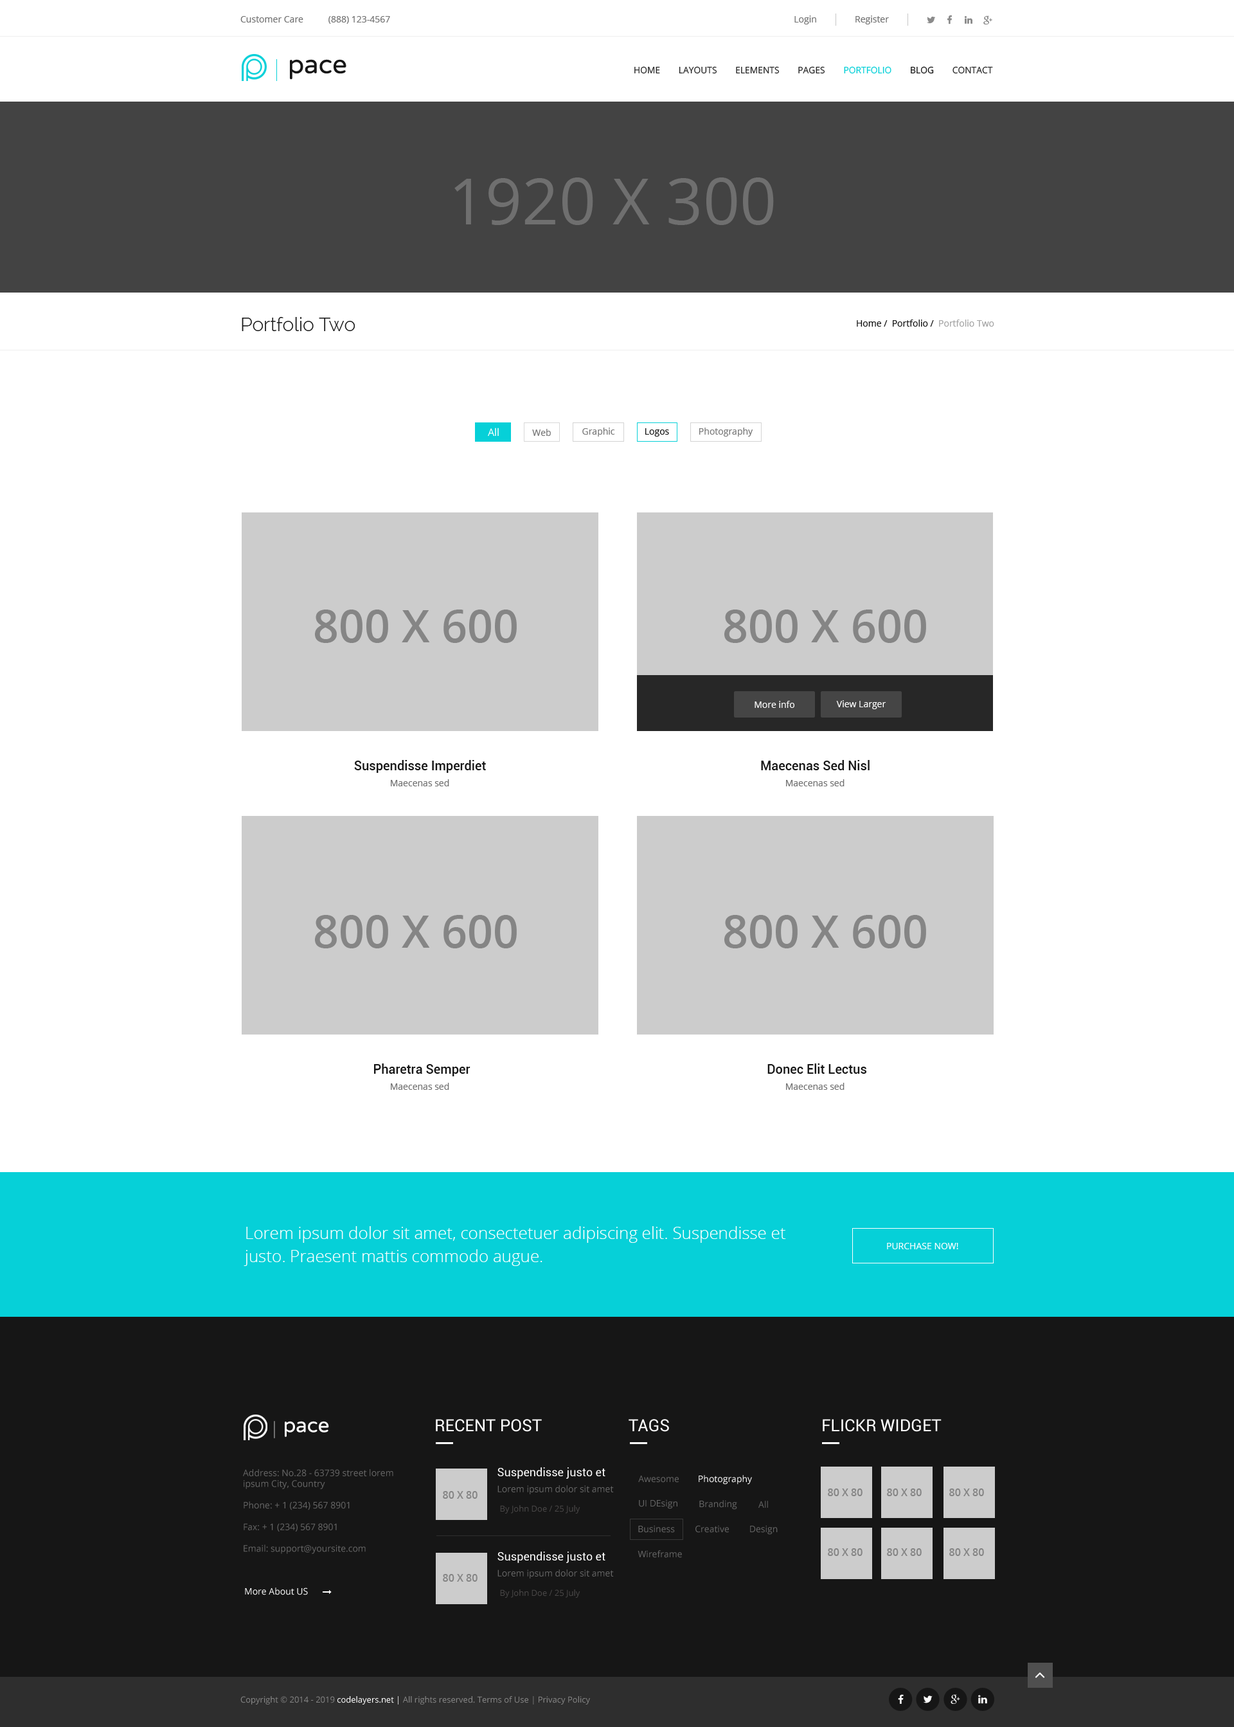
<style>
.page{position:relative;width:1234px;height:1727px;background:#ffffff}
.page>*{position:absolute;margin:0}
.t1{font:9px "OpenSans";color:#727272}
.t2{font:25.7px "VarelaRound-Regular";color:#161616}
.t3{font:9px "OpenSans";color:#272727;text-transform:uppercase}
.t4{font:9px "OpenSans";color:#06d0d8;text-transform:uppercase}
.t5{font:9px "OpenSans";color:#161616;text-transform:uppercase}
.t6{font:64.3px "OpenSans";color:#6f6f6f;text-transform:uppercase}
.t7{font:19.3px "Raleway-Light";color:#161616}
.t8{font:9px "OpenSans";color:#161616}
.t9{font:9px "OpenSans";color:#a4a4a4}
.t10{font:10.3px "OpenSans";color:#ffffff}
.t11{font:9px "OpenSans";color:#787878}
.t12{font:45px "OpenSans-Semibold";color:#858585;text-transform:uppercase}
.t13{font:9px "OpenSans";color:#ffffff}
.t14{font:12.9px "Roboto-Medium";color:#161616}
.t15{font:16.7px/23.1px "OpenSans-Light";color:#ffffff}
.t16{font:9px "OpenSans";color:#ffffff;text-transform:uppercase}
.t17{font:20.2px "VarelaRound-Regular";color:#ffffff}
.t18{font:16.7px "Roboto-Regular";color:#ffffff;text-transform:uppercase}
.t19{font:9px "OpenSans";color:#666666}
.t20{font:11.6px "Roboto-Regular";color:#ffffff}
.t21{font:10.3px "OpenSans-Semibold";color:#858585;text-transform:uppercase}
.t22{font:8.4px "OpenSans";color:#494747}
.t23{font:8.4px "OpenSans-Regular";color:#858585}
.t24{font:8.4px "OpenSans-Regular";color:#ffffff}
</style>
<div class="page">
<p class="t1" style="left:240px;top:16px;width:63px;height:6px">Customer Care</p>
<p class="t1" style="left:328px;top:16px;width:62px;height:8px">(888) 123-4567</p>
<p class="t1" style="left:795px;top:15px;width:21px;height:9px">Login</p>
<p class="t1" style="left:856px;top:15px;width:33px;height:9px">Register</p>
<p class="t2" style="left:290px;top:59px;width:56px;height:21px">pace</p>
<p class="t3" style="left:634px;top:66px;width:359px;height:8px">Home        layouts        elements        pages        <span class="t4">portfolio        </span><span class="t5">blog</span>        contact</p>
<p class="t6" style="left:455px;top:177px;width:319px;height:48px">1920 x 300</p>
<p class="t7" style="left:242px;top:317px;width:114px;height:14px">Portfolio Two</p>
<p class="t8" style="left:857px;top:320px;width:138px;height:7px">Home /  Portfolio /  <span class="t9">Portfolio Two</span></p>
<p class="t10" style="left:488px;top:428px;width:11px;height:8px">All</p>
<p class="t11" style="left:532px;top:429px;width:19px;height:7px">Web</p>
<p class="t11" style="left:582px;top:428px;width:33px;height:9px">Graphic</p>
<p class="t8" style="left:645px;top:428px;width:24px;height:9px">Logos</p>
<p class="t11" style="left:699px;top:428px;width:54px;height:9px">Photography</p>
<p class="t12" style="left:315px;top:609px;width:202px;height:34px">800 x 600</p>
<p class="t12" style="left:724px;top:609px;width:202px;height:34px">800 x 600</p>
<p class="t13" style="left:755px;top:701px;width:40px;height:7px">More info</p>
<p class="t13" style="left:836px;top:700px;width:51px;height:9px">View Larger</p>
<p class="t14" style="left:354px;top:760px;width:132px;height:13px">Suspendisse Imperdiet</p>
<p class="t14" style="left:761px;top:760px;width:109px;height:10px">Maecenas Sed Nisl</p>
<p class="t1" style="left:391px;top:779px;width:58px;height:7px">Maecenas sed</p>
<p class="t1" style="left:786px;top:779px;width:59px;height:7px">Maecenas sed</p>
<p class="t12" style="left:315px;top:915px;width:202px;height:33px">800 x 600</p>
<p class="t12" style="left:724px;top:915px;width:202px;height:33px">800 x 600</p>
<p class="t14" style="left:374px;top:1063px;width:97px;height:13px">Pharetra Semper</p>
<p class="t14" style="left:768px;top:1063px;width:99px;height:11px">Donec Elit Lectus</p>
<p class="t1" style="left:391px;top:1083px;width:58px;height:7px">Maecenas sed</p>
<p class="t1" style="left:786px;top:1083px;width:59px;height:7px">Maecenas sed</p>
<p class="t15" style="left:244px;top:1226px;width:542px;height:40px">Lorem ipsum dolor sit amet, consectetuer adipiscing elit. Suspendisse et justo. Praesent mattis commodo augue.</p>
<p class="t16" style="left:887px;top:1243px;width:72px;height:6px">Purchase now!</p>
<p class="t17" style="left:285px;top:1421px;width:44px;height:16px">pace</p>
<p class="t18" style="left:436px;top:1419px;width:106px;height:13px">Recent Post</p>
<p class="t18" style="left:629px;top:1419px;width:40px;height:13px">Tags</p>
<p class="t18" style="left:823px;top:1419px;width:119px;height:13px">Flickr Widget</p>
<p class="t19" style="left:243px;top:1469px;width:150px;height:85px">Address: No.28 - 63739 street lorem ipsum City, Country<br><br>Phone: + 1 (234) 567 8901<br><br>Fax: + 1 (234) 567 8901<br><br>Email: support@yoursite.com</p>
<p class="t20" style="left:498px;top:1467px;width:108px;height:12px">Suspendisse justo et</p>
<p class="t19" style="left:638px;top:1475px;width:41px;height:7px">Awesome</p>
<p class="t13" style="left:699px;top:1475px;width:53px;height:9px">Photography</p>
<p class="t21" style="left:443px;top:1491px;width:35px;height:7px">80 x 80</p>
<p class="t19" style="left:498px;top:1485px;width:116px;height:9px">Lorem ipsum dolor sit amet</p>
<p class="t21" style="left:828px;top:1488px;width:35px;height:8px">80 x 80</p>
<p class="t21" style="left:887px;top:1488px;width:35px;height:8px">80 x 80</p>
<p class="t21" style="left:950px;top:1488px;width:34px;height:8px">80 x 80</p>
<p class="t22" style="left:500px;top:1505px;width:80px;height:8px">By John Doe / 25 July</p>
<p class="t19" style="left:639px;top:1499px;width:39px;height:10px">UI DEsign</p>
<p class="t19" style="left:699px;top:1500px;width:38px;height:9px">Branding</p>
<p class="t19" style="left:759px;top:1500px;width:9px;height:8px">All</p>
<p class="t19" style="left:638px;top:1525px;width:37px;height:8px">Business</p>
<p class="t19" style="left:696px;top:1525px;width:33px;height:8px">Creative</p>
<p class="t19" style="left:750px;top:1525px;width:28px;height:9px">Design</p>
<p class="t20" style="left:498px;top:1551px;width:108px;height:12px">Suspendisse justo et</p>
<p class="t19" style="left:638px;top:1550px;width:44px;height:8px">Wireframe</p>
<p class="t21" style="left:828px;top:1548px;width:35px;height:8px">80 x 80</p>
<p class="t21" style="left:887px;top:1548px;width:35px;height:8px">80 x 80</p>
<p class="t21" style="left:950px;top:1548px;width:34px;height:8px">80 x 80</p>
<p class="t21" style="left:443px;top:1574px;width:35px;height:7px">80 x 80</p>
<p class="t19" style="left:498px;top:1569px;width:116px;height:9px">Lorem ipsum dolor sit amet</p>
<p class="t13" style="left:245px;top:1587px;width:63px;height:8px">More About US</p>
<p class="t22" style="left:500px;top:1589px;width:80px;height:9px">By John Doe / 25 July</p>
<p class="t23" style="left:240px;top:1696px;width:350px;height:8px">Copyright © 2014 - 2019 <span class="t24">codelayers.net |</span> All rights reserved. Terms of Use | Privacy Policy</p>
</div>
